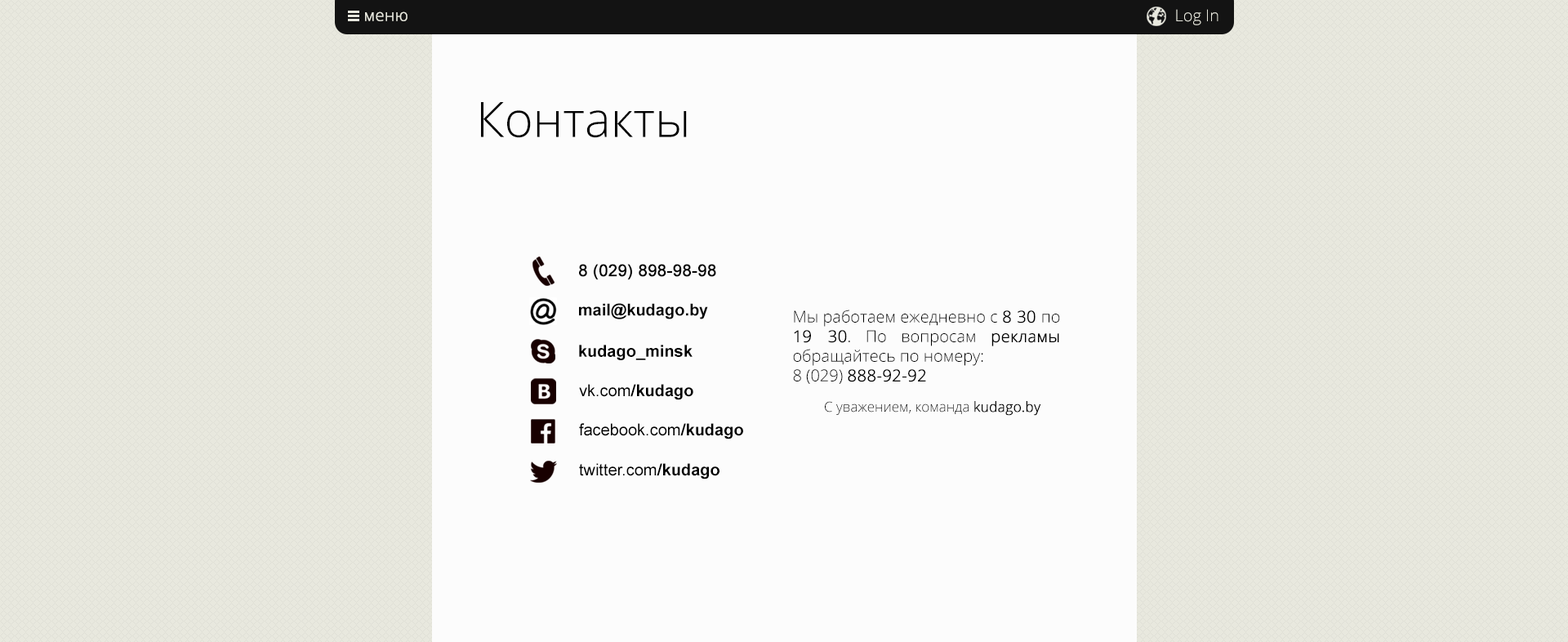
<style>
.page{position:relative;width:1568px;height:642px;background:#fcfcfc}
.page>*{position:absolute;margin:0}
.t1{font:16.3px "OpenSans-Light";color:#e8e8de;font-weight:bold}
.t2{font:16.3px "OpenSans-Light";color:#e8e8de}
.t3{font:49px "OpenSans-Light";color:#000000}
.t4{font:16.3px "ArialMT";color:#000000;font-weight:bold}
.t5{font:16.3px "Arial-BoldMT";color:#000000}
.t6{font:16.3px "OpenSans-Light";color:#000000}
.t7{font:16.3px "OpenSans-Light";color:#000000;font-weight:bold}
.t8{font:16.3px "ArialMT";color:#000000}
.t9{font:13.9px "OpenSans-Light";color:#000000}
.t10{font:13.9px "OpenSans-Light";color:#000000;font-weight:bold}
</style>
<div class="page">
<p class="t1" style="left:365px;top:11px;width:43px;height:10px">меню</p>
<p class="t2" style="left:1176px;top:9px;width:42px;height:16px">Log In</p>
<p class="t3" style="left:481px;top:102px;width:206px;height:36px">Контакты</p>
<p class="t4" style="left:579px;top:264px;width:137px;height:16px">8 (029) 898-98-98</p>
<p class="t5" style="left:579px;top:303px;width:129px;height:16px">mail@kudago.by</p>
<p class="t6" style="left:793px;top:310px;width:267px;height:74px;text-align:justify">Мы работаем ежедневно с <span class="t7">8 30 </span>по <span class="t7">19 30</span>. По вопросам <span class="t7">рекламы      </span>обращайтесь по номеру: <br>8 (029) <span class="t7">888-92-92</span></p>
<p class="t5" style="left:579px;top:345px;width:114px;height:15px">kudago_minsk</p>
<p class="t8" style="left:579px;top:384px;width:114px;height:16px">vk.com<span class="t4">/</span><span class="t5">kudago</span></p>
<p class="t9" style="left:825px;top:401px;width:216px;height:15px">С уважением, команда <span class="t10">kudago.by</span></p>
<p class="t8" style="left:579px;top:423px;width:164px;height:16px">facebook.com<span class="t4">/</span><span class="t5">kudago</span></p>
<p class="t8" style="left:579px;top:463px;width:140px;height:16px">twitter.com<span class="t4">/</span><span class="t5">kudago</span></p>
</div>
